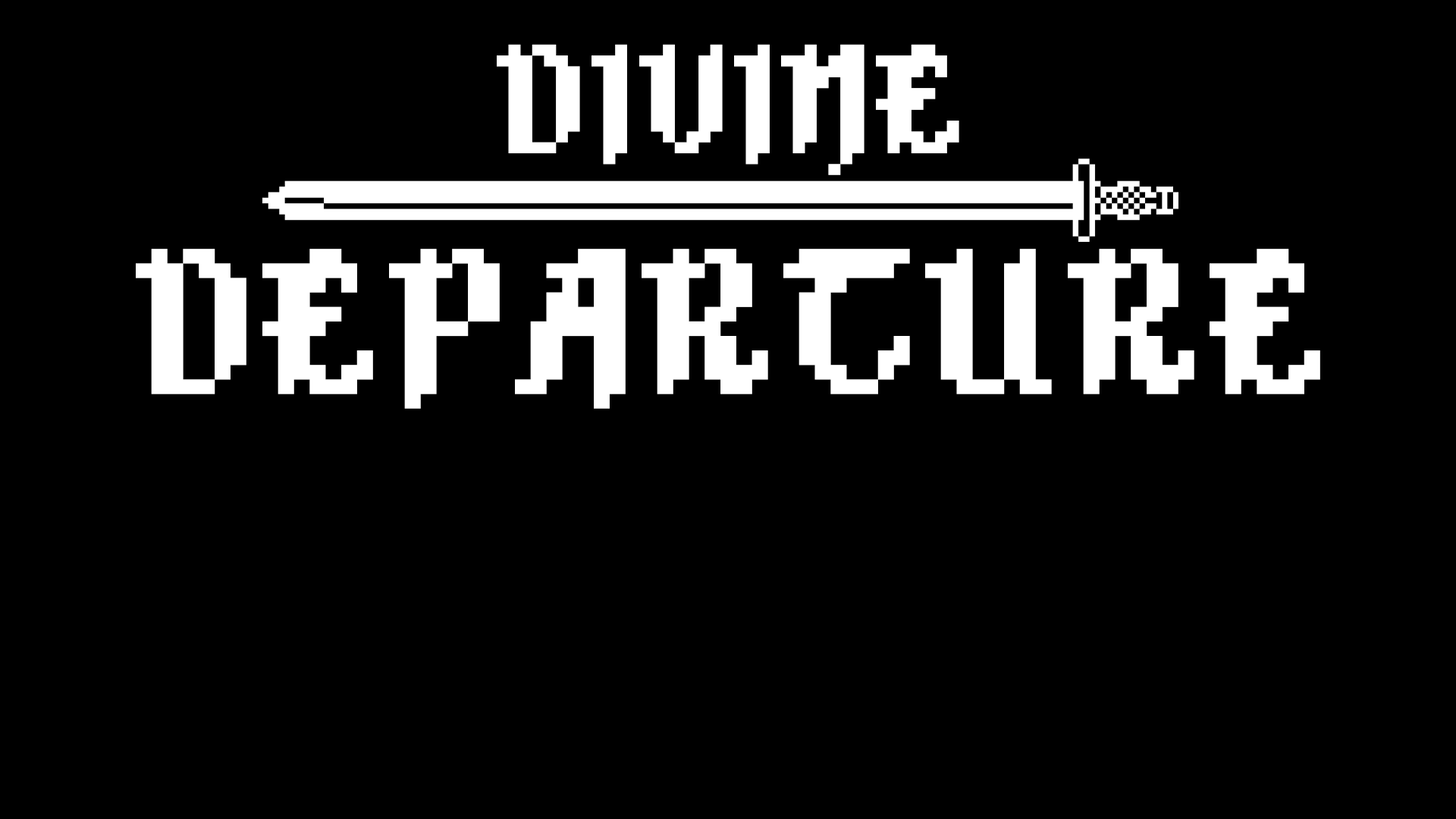
<style>
.page{position:relative;width:1456px;height:819px;background:#000000}
.page>*{position:absolute;margin:0}
.t1{font:173.8px "Alkhemikal";color:#ffffff;scale:1.09 1}
.t2{font:231.7px "Alkhemikal";color:#ffffff;scale:1.09 1}
</style>
<div class="page">
<p class="t1" style="left:497px;top:44px;width:462px;height:131px">DIVINE</p>
<p class="t2" style="left:136px;top:249px;width:1184px;height:160px">DEPARTURE</p>
</div>
